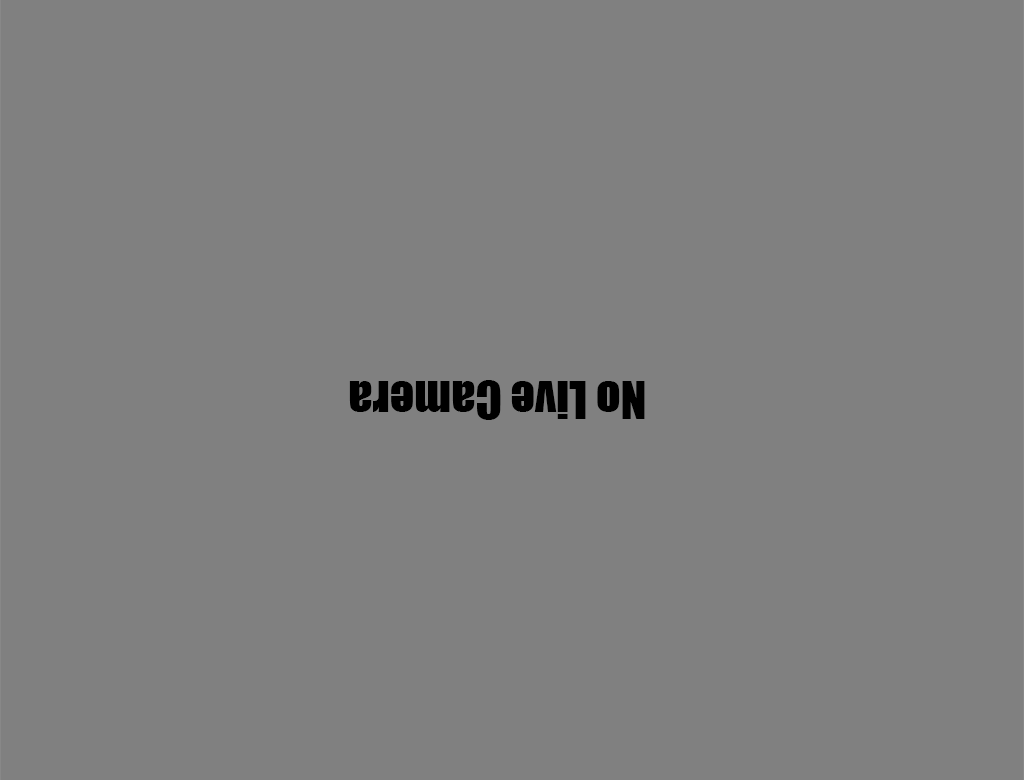
<style>
.page{position:relative;width:1024px;height:780px;background:#808080}
.page>*{position:absolute;margin:0}
.t1{font:48px "Impact";color:#000000}
</style>
<div class="page">
<p class="t1" style="left:349px;top:380px;width:296px;height:40px;rotate:180deg">No Live Camera</p>
</div>
